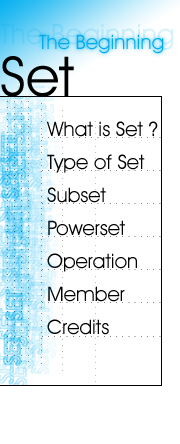
<style>
.page{position:relative;width:180px;height:444px;background:#ffffff}
.page>*{position:absolute;margin:0}
.t1{font:20.2px "AvantGardeITCbyBT-Book";color:#00aeef}
.t2{font:55px "AvantGardeITCbyBT-Book";color:#000000}
.t3{font:11px "Courier"}
.t4{font:20.2px/33px "AvantGardeITCbyBT-Book";color:#000000}
</style>
<div class="page">
<p class="t1" style="left:39px;top:34px;width:125px;height:20px">The Beginning</p>
<p class="t2" style="left:1px;top:56px;width:73px;height:41px">Set</p>
<p class="t3" style="left:7px;top:101px;width:1px;height:261px;rotate:90deg">...........................................</p>
<p class="t3" style="left:14px;top:101px;width:1px;height:261px;rotate:90deg">...........................................</p>
<p class="t3" style="left:21px;top:101px;width:1px;height:261px;rotate:90deg">...........................................</p>
<p class="t3" style="left:28px;top:101px;width:1px;height:261px;rotate:90deg">...........................................</p>
<p class="t3" style="left:41px;top:103px;width:1px;height:261px;rotate:90deg">...........................................</p>
<p class="t3" style="left:62px;top:110px;width:1px;height:261px;rotate:90deg">...........................................</p>
<p class="t4" style="left:46px;top:121px;width:112px;height:214px">What is Set ?<br>Type of Set<br>Subset<br>Powerset<br>Operation<br>Member<br>Credits</p>
<p class="t3" style="left:95px;top:121px;width:1px;height:261px;rotate:90deg">...........................................</p>
</div>
